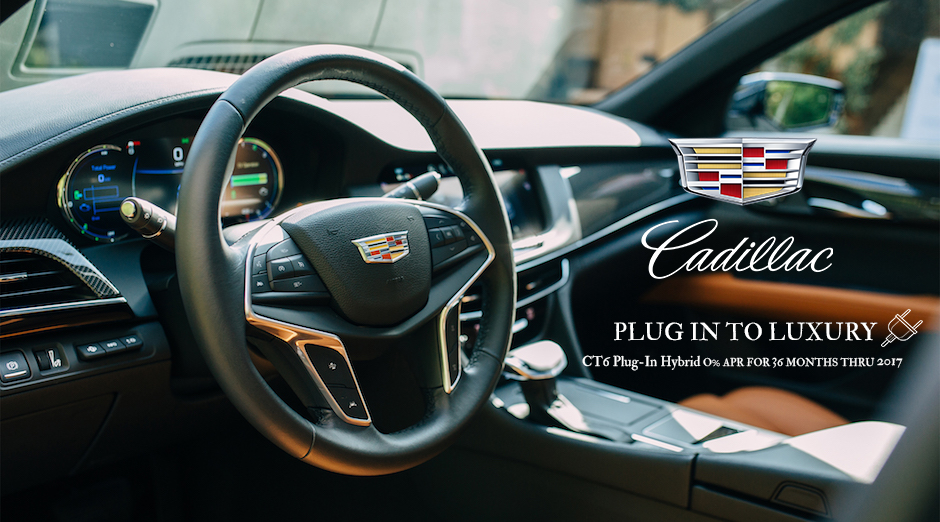
<style>
.page{position:relative;width:940px;height:522px}
.page>*{position:absolute;margin:0}
.t1{font:24px "IM_FELL_Double_Pica_Roman";color:#ffffff}
.t2{font:14px "IM_FELL_Double_Pica_Roman";color:#ffffff}
.t3{font:11px "IM_FELL_Double_Pica_Roman";color:#ffffff}
.t4{font:12px "IM_FELL_Double_Pica_Roman";color:#ffffff}
</style>
<div class="page">
<p class="t1" style="left:614px;top:321px;width:264px;height:20px">PLUG IN TO LUXURY</p>
<p class="t2" style="left:582px;top:355px;width:119px;height:16px">CT6 Plug-In Hybrid</p>
<p class="t3" style="left:703px;top:357px;width:172px;height:10px">O% APR FOR   <span class="t4">6 </span>MONTHS THRU</p>
<p class="t2" style="left:772px;top:357px;width:5px;height:11px">3</p>
<p class="t2" style="left:877px;top:358px;width:26px;height:10px">2017</p>
</div>
